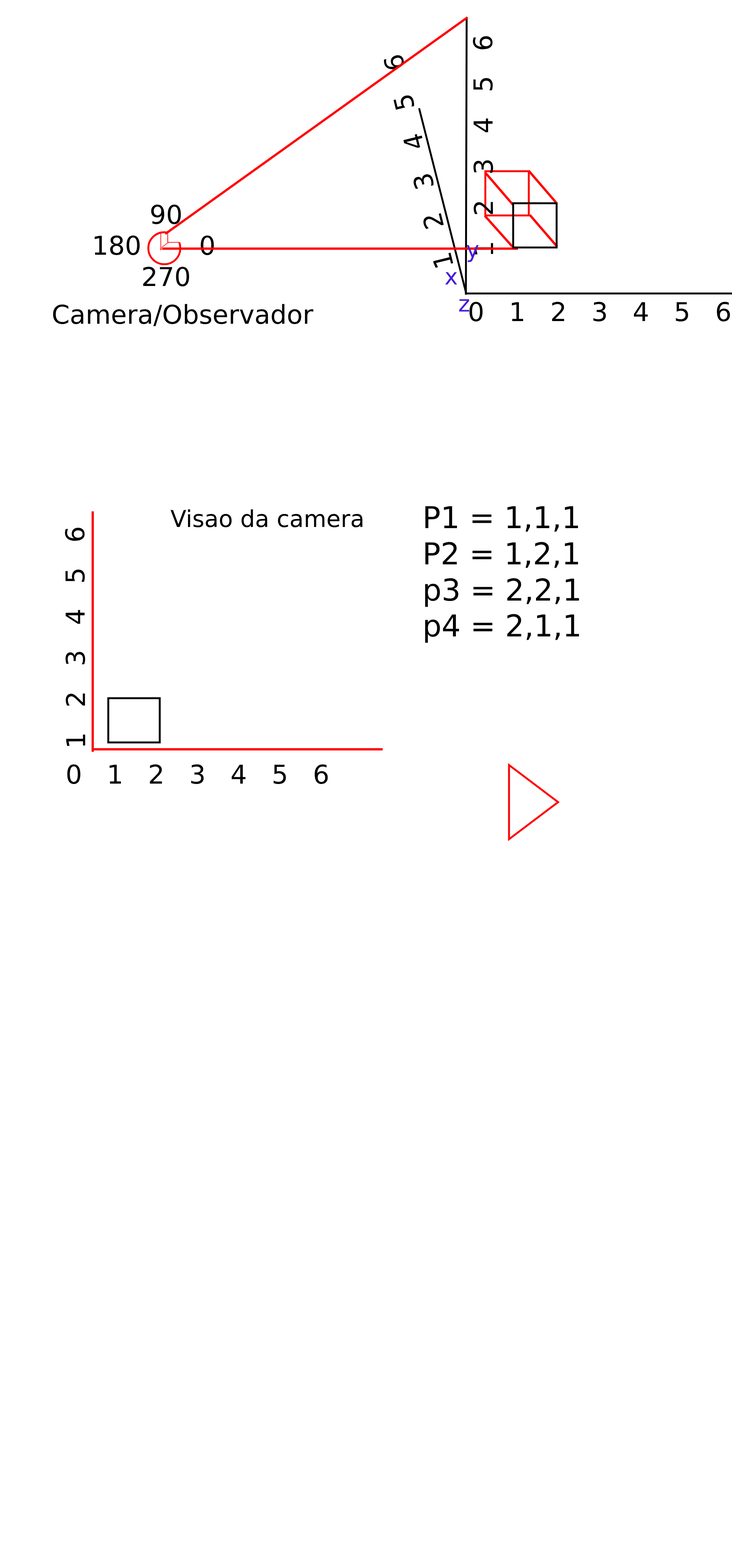
<style>
.page{position:relative;width:732px;height:1568px;background:#ffffff}
.page>*{position:absolute;margin:0}
.t1{font:25.9px "DejaVuSans";color:#000000}
.t2{font:22.5px "DejaVuSans";color:#491dd9}
.t3{font:23.3px "DejaVuSans";color:#000000}
.t4{font:30.1px "DejaVuSans";color:#000000}
</style>
<div class="page">
<p class="t1" style="left:473px;top:36px;width:20px;height:219px;rotate:-90deg">1   2   3   4   5   6</p>
<p class="t1" style="left:384px;top:55px;width:69px;height:213px;rotate:-104deg">1   2   3   4   5   6</p>
<p class="t1" style="left:95px;top:204px;width:119px;height:82px">90   <br>180       0<br>      270</p>
<p class="t2" style="left:445px;top:245px;width:34px;height:67px">y<br>x   <br> z</p>
<p class="t1" style="left:53px;top:304px;width:260px;height:22px">Camera/Observador</p>
<p class="t1" style="left:469px;top:302px;width:261px;height:19px">0   1   2   3   4   5   6</p>
<p class="t3" style="left:170px;top:509px;width:193px;height:18px">Visao da camera</p>
<p class="t4" style="left:425px;top:506px;width:154px;height:137px">P1 = 1,1,1<br>P2 = 1,2,1<br>p3 = 2,2,1<br>p4 = 2,1,1</p>
<p class="t1" style="left:65px;top:527px;width:20px;height:219px;rotate:-90deg">1   2   3   4   5   6</p>
<p class="t1" style="left:67px;top:764px;width:261px;height:20px">0   1   2   3   4   5   6</p>
</div>
